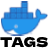
<style>
.page{position:relative;width:48px;height:48px;background:#ffffff}
.page>*{position:absolute;margin:0}
.t1{font:13.5px "DelaGothicOne-Regular";color:#000000}
</style>
<div class="page">
<p class="t1" style="left:0px;top:36px;width:48px;height:12px">TAGS</p>
</div>
